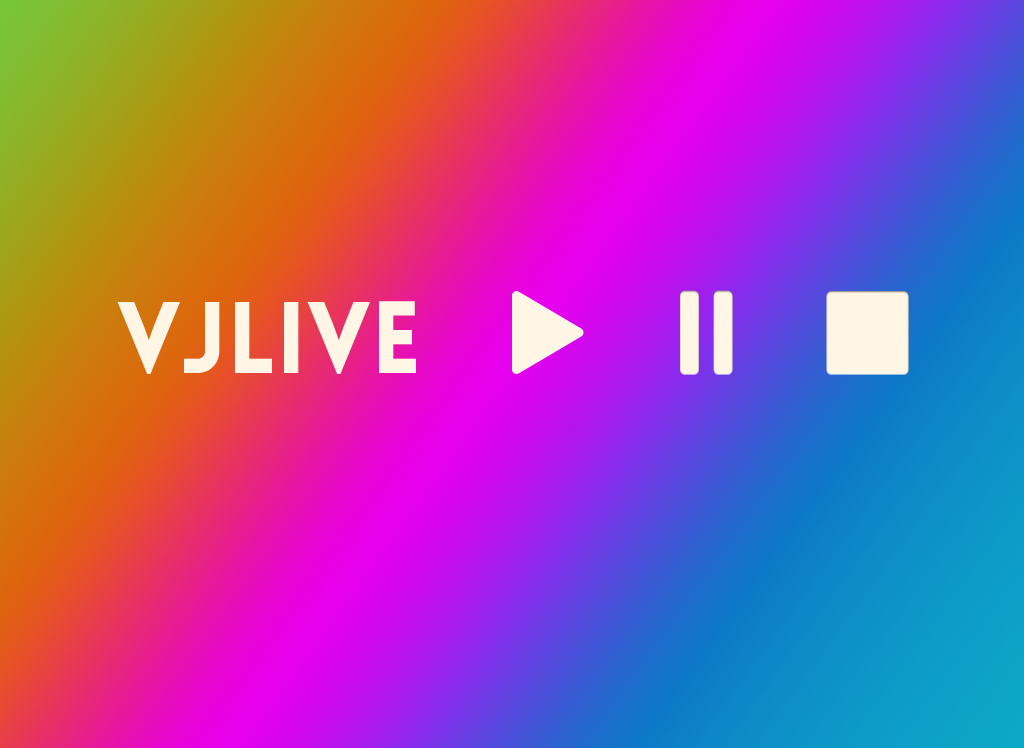
<style>
.page{position:relative;width:1024px;height:748px}
.page>*{position:absolute;margin:0}
.t1{font:100px "Lovelo-Black";color:#fff6e6}
</style>
<div class="page">
<p class="t1" style="left:117px;top:301px;width:299px;height:73px">VjLive</p>
</div>
